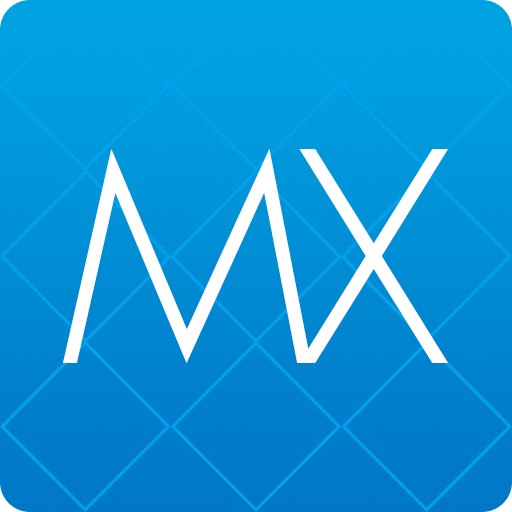
<style>
.page{position:relative;width:512px;height:512px}
.page>*{position:absolute;margin:0}
.t1{font:306.3px "phantom-ultralight";color:#ffffff}
</style>
<div class="page">
<p class="t1" style="left:63px;top:149px;width:248px;height:214px">m</p>
<p class="t1" style="left:299px;top:149px;width:149px;height:214px">x</p>
</div>
